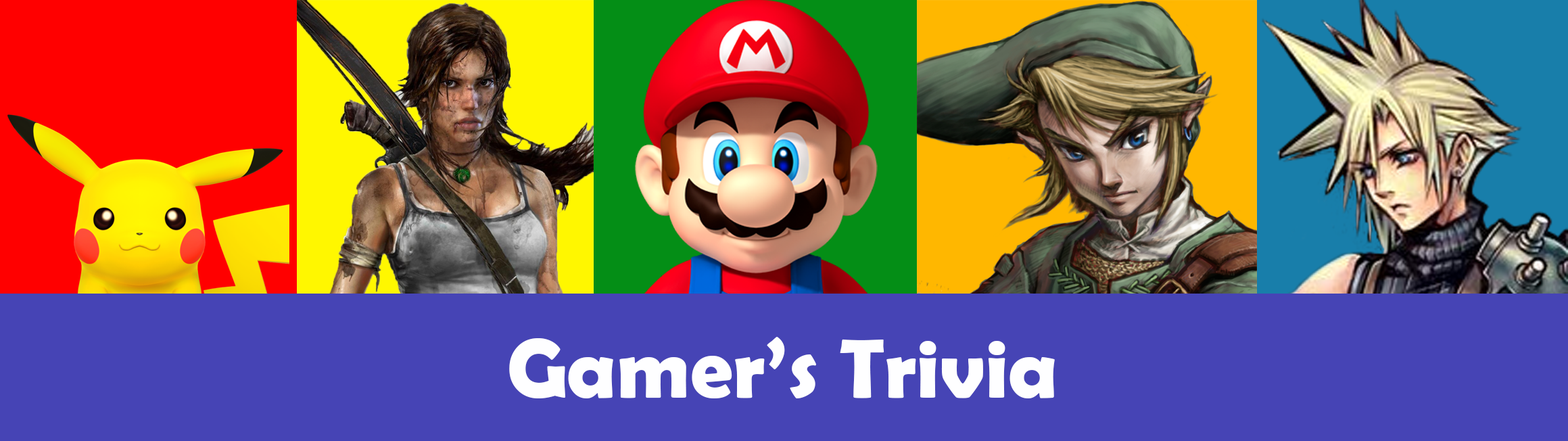
<style>
.page{position:relative;width:1568px;height:441px;background:#4644b5}
.page>*{position:absolute;margin:0}
.t1{font:84.5px "BerlinSansFBDemi-Bold";color:#fefeff}
.t2{font:50.7px "SourceCodeVariable-Roman";color:#fefeff}
</style>
<div class="page">
<p class="t1" style="left:509px;top:337px;width:546px;height:61px"><span class="t2"><br></span>Gamer’s Trivia</p>
</div>
